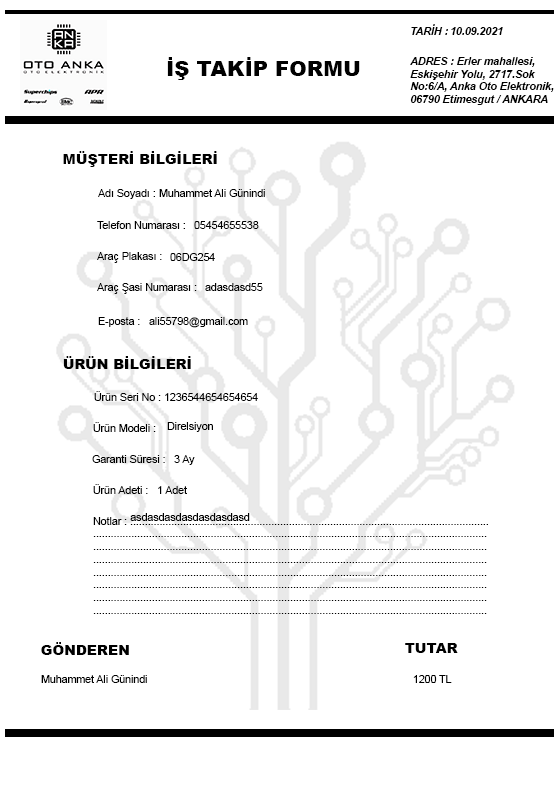
<style>
.page{position:relative;width:559px;height:793px;background:#ffffff}
.page>*{position:absolute;margin:0}
.t1{font:10.6px "Arial-BoldItalicMT";color:#000000}
.t2{font:21.2px "Arial-Black";color:#000000}
.t3{font:14.1px "Arial-Black";color:#000000}
.t4{font:10.6px "ArialMT";color:#000000}
</style>
<div class="page">
<p class="t1" style="left:411px;top:24px;width:37px;height:11px">TARİH :</p>
<p class="t1" style="left:451px;top:27px;width:52px;height:8px">10.09.2021</p>
<p class="t2" style="left:167px;top:57px;width:193px;height:23px">İŞ TAKİP FORMU</p>
<p class="t1" style="left:410px;top:57px;width:144px;height:48px">ADRES : Erler mahallesi, <br>Eskişehir Yolu, 2717.Sok <br>No:6/A, Anka Oto Elektronik, <br>06790 Etimesgut / ANKARA</p>
<p class="t3" style="left:63px;top:151px;width:154px;height:16px">MÜŞTERİ BİLGİLERİ</p>
<p class="t4" style="left:98px;top:189px;width:57px;height:10px">Adı Soyadı :</p>
<p class="t4" style="left:159px;top:189px;width:106px;height:8px">Muhammet Ali Günindi</p>
<p class="t4" style="left:97px;top:221px;width:88px;height:8px">Telefon Numarası :</p>
<p class="t4" style="left:194px;top:221px;width:65px;height:8px">05454655538</p>
<p class="t4" style="left:97px;top:252px;width:65px;height:11px">Araç Plakası :</p>
<p class="t4" style="left:170px;top:253px;width:45px;height:8px">06DG254</p>
<p class="t4" style="left:97px;top:283px;width:100px;height:11px">Araç Şasi Numarası :</p>
<p class="t4" style="left:205px;top:283px;width:58px;height:8px">adasdasd55</p>
<p class="t4" style="left:98px;top:317px;width:42px;height:10px">E-posta :</p>
<p class="t4" style="left:149px;top:317px;width:99px;height:11px">ali55798@gmail.com</p>
<p class="t3" style="left:63px;top:356px;width:128px;height:13px">ÜRÜN BİLGİLERİ</p>
<p class="t4" style="left:94px;top:391px;width:67px;height:10px">Ürün Seri No :</p>
<p class="t4" style="left:165px;top:393px;width:93px;height:8px">1236544654654654</p>
<p class="t4" style="left:93px;top:422px;width:63px;height:10px">Ürün Modeli :</p>
<p class="t4" style="left:167px;top:422px;width:46px;height:10px">Direlsiyon</p>
<p class="t4" style="left:92px;top:455px;width:73px;height:8px">Garanti Süresi :</p>
<p class="t4" style="left:174px;top:455px;width:21px;height:10px">3 Ay</p>
<p class="t4" style="left:93px;top:484px;width:55px;height:10px">Ürün Adeti :</p>
<p class="t4" style="left:158px;top:486px;width:29px;height:8px">1 Adet</p>
<p class="t4" style="left:130px;top:513px;width:120px;height:8px">asdasdasdasdasdasdasd</p>
<p class="t3" style="left:41px;top:642px;width:88px;height:13px">GÖNDEREN</p>
<p class="t3" style="left:405px;top:643px;width:53px;height:10px">TUTAR</p>
<p class="t4" style="left:41px;top:675px;width:106px;height:8px">Muhammet Ali Günindi</p>
<p class="t4" style="left:413px;top:675px;width:39px;height:8px">1200 TL</p>
</div>
